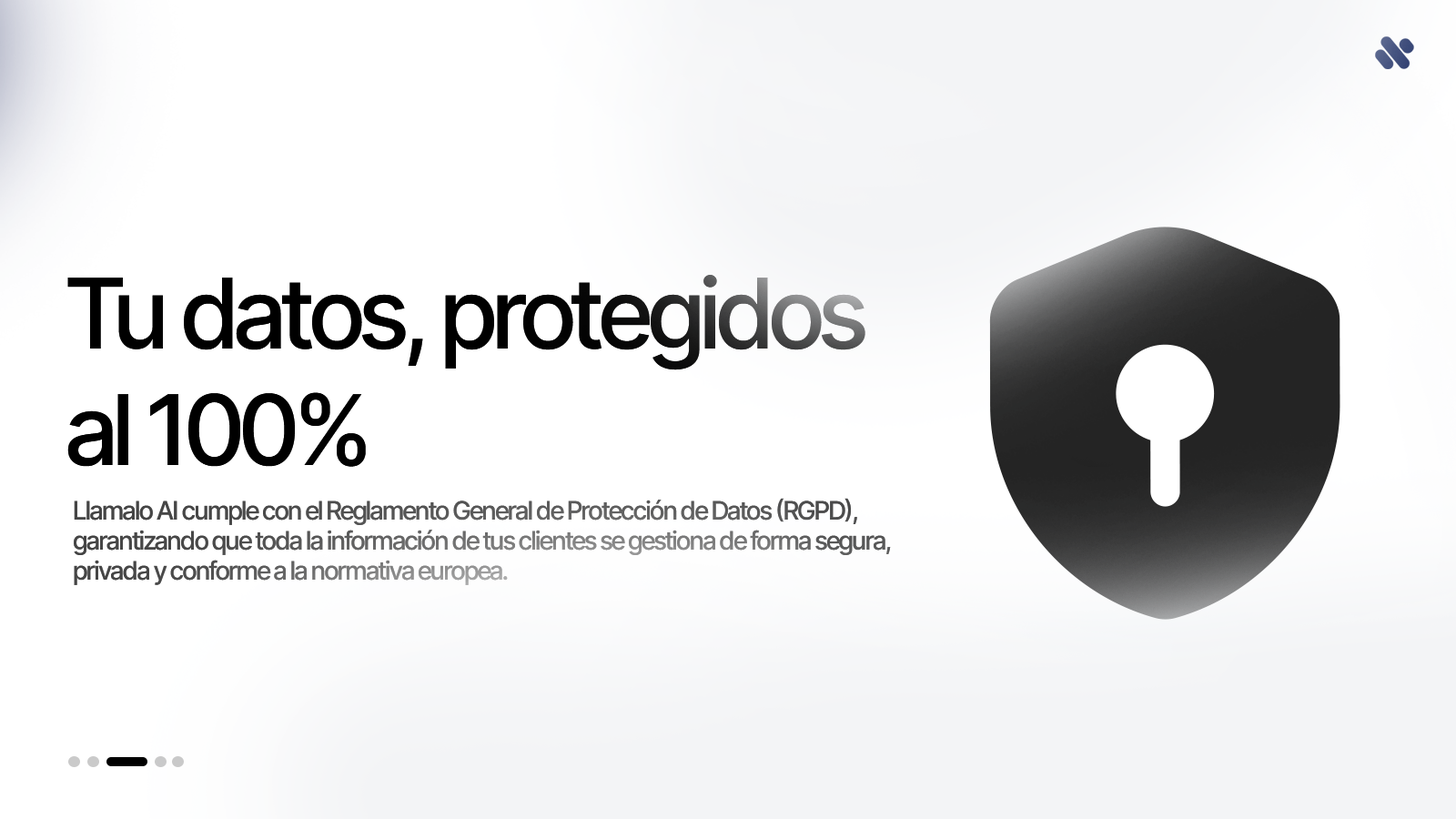
<style>
.page{position:relative;width:1456px;height:819px;background:#ffffff}
.page>*{position:absolute;margin:0}
.t1{font:97.3px "Inter-Medium";letter-spacing:-0.082em;color:#000000}
.t2{font:25.3px "Inter-Medium";letter-spacing:-0.082em}
</style>
<div class="page">
<p class="t1" style="left:67px;top:275px;width:798px;height:192px">Tu datos, protegidos <br>al 100%</p>
<p class="t2" style="left:74px;top:498px;width:817px;height:87px">Llamalo AI cumple con el Reglamento General de Protección de Datos (RGPD), <br>garantizando que toda la información de tus clientes se gestiona de forma segura, <br>privada y conforme a la normativa europea.</p>
</div>
